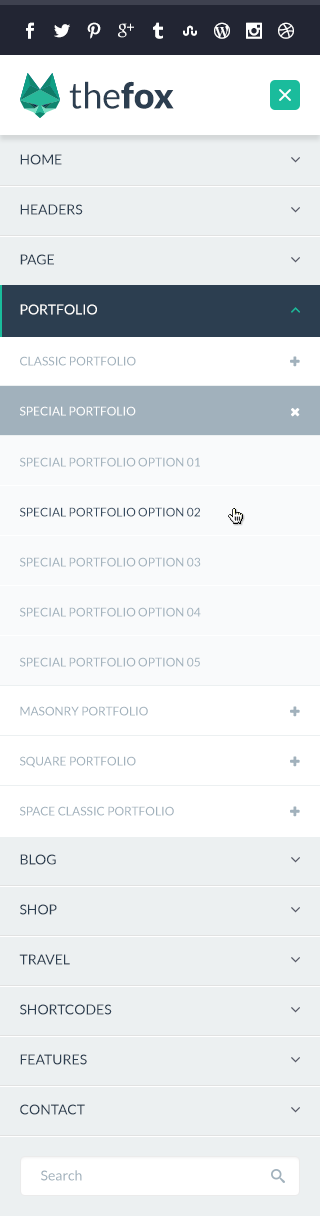
<style>
.page{position:relative;width:320px;height:1216px;background:#ecf0f1}
.page>*{position:absolute;margin:0}
.t1{font:36px "Lato-Regular";color:#2c3e50}
.t2{font:36px "Lato-Black";color:#2c3e50}
.t3{font:14px/50px "Lato-Regular";color:#2c3e50;text-transform:uppercase}
.t4{font:14px/50px "Lato-Regular";color:#ffffff;text-transform:uppercase}
.t5{font:12px/50px "Lato-Regular";color:#a1b1bc;text-transform:uppercase}
.t6{font:12px/50px "Lato-Regular";color:#34495e;text-transform:uppercase}
.t7{font:14px "Lato-Regular";color:#a1b1bc}
</style>
<div class="page">
<p class="t1" style="left:69px;top:81px;width:105px;height:28px">the<span class="t2">fox</span></p>
<p class="t3" style="left:19px;top:154px;width:93px;height:961px">Home<br>HEADERS<br>Page<br><span class="t4">Portfolio<br></span><br><br><br><br><br><br><br><br><br><br>Blog<br>shop<br>travel<br>shortcodes<br>features<br>contact</p>
<p class="t5" style="left:20px;top:457px;width:181px;height:210px">SPECIAL PORTFOLIO OPTION 01<br><span class="t6">SPECIAL PORTFOLIO OPTION 02<br></span>SPECIAL PORTFOLIO OPTION 03<br>SPECIAL PORTFOLIO OPTION 04<br>SPECIAL PORTFOLIO OPTION 05</p>
<p class="t7" style="left:41px;top:1170px;width:41px;height:11px">Search</p>
</div>
